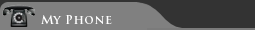
<style>
.page{position:relative;width:255px;height:30px;background:#808080}
.page>*{position:absolute;margin:0}
.t1{font:12px "TrajanPro-Bold";color:#ffffff;scale:1.05 1}
</style>
<div class="page">
<p class="t1" style="left:41px;top:15px;width:71px;height:9px">My Phone</p>
</div>
